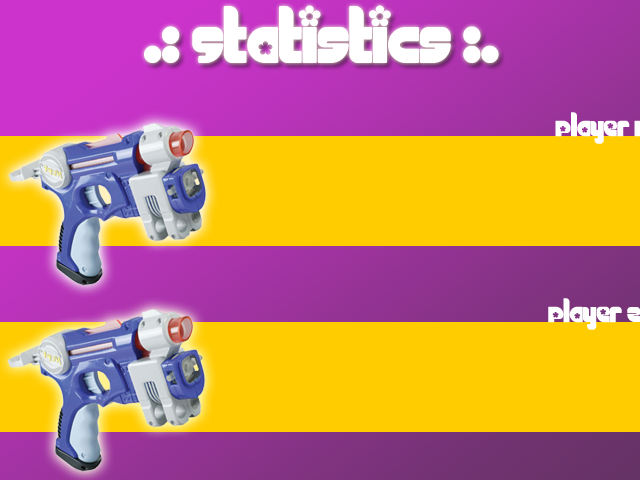
<style>
.page{position:relative;width:640px;height:480px;background:#ffcc00}
.page>*{position:absolute;margin:0}
.t1{font:72px "Chick";color:#ffffff}
.t2{font:30px "Chick";color:#ffffff}
</style>
<div class="page">
<p class="t1" style="left:144px;top:5px;width:355px;height:58px">.: Statistics :.</p>
<p class="t2" style="left:555px;top:112px;width:86px;height:32px">Player 1</p>
<p class="t2" style="left:548px;top:298px;width:93px;height:32px">Player 2</p>
</div>
